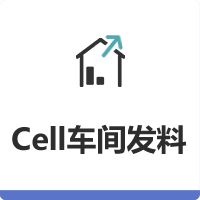
<style>
.page{position:relative;width:200px;height:200px;background:#ffffff}
.page>*{position:absolute;margin:0}
.t1{font:30px "MicrosoftYaHei-Bold";color:#2d2d2d}
</style>
<div class="page">
<p class="t1" style="left:12px;top:124px;width:175px;height:30px">Cell车间发料</p>
</div>
